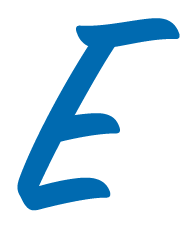
<style>
.page{position:relative;width:196px;height:247px;background:#ffffff}
.page>*{position:absolute;margin:0}
.t1{font:300px "SignPainter-HouseScript";color:#006ab0;font-weight:bold}
</style>
<div class="page">
<p class="t1" style="left:17px;top:18px;width:163px;height:193px">E</p>
</div>
